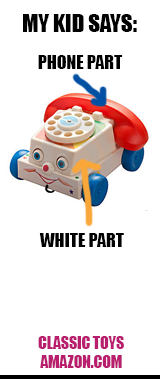
<style>
.page{position:relative;width:160px;height:379px;background:#ffffff}
.page>*{position:absolute;margin:0}
.t1{font:22.8px "Impact";color:#000000}
.t2{font:17.8px "Impact";color:#000000}
.t3{font:15.6px "Impact";color:#b91e6e}
</style>
<div class="page">
<p class="t1" style="left:23px;top:14px;width:114px;height:18px">MY KID SAYS:</p>
<p class="t2" style="left:38px;top:55px;width:85px;height:14px">PHONE PART</p>
<p class="t2" style="left:39px;top:233px;width:85px;height:14px">WHITE PART</p>
<p class="t3" style="left:38px;top:336px;width:86px;height:32px;text-align:center">CLASSIC TOYS<br>AMAZON.COM</p>
</div>
